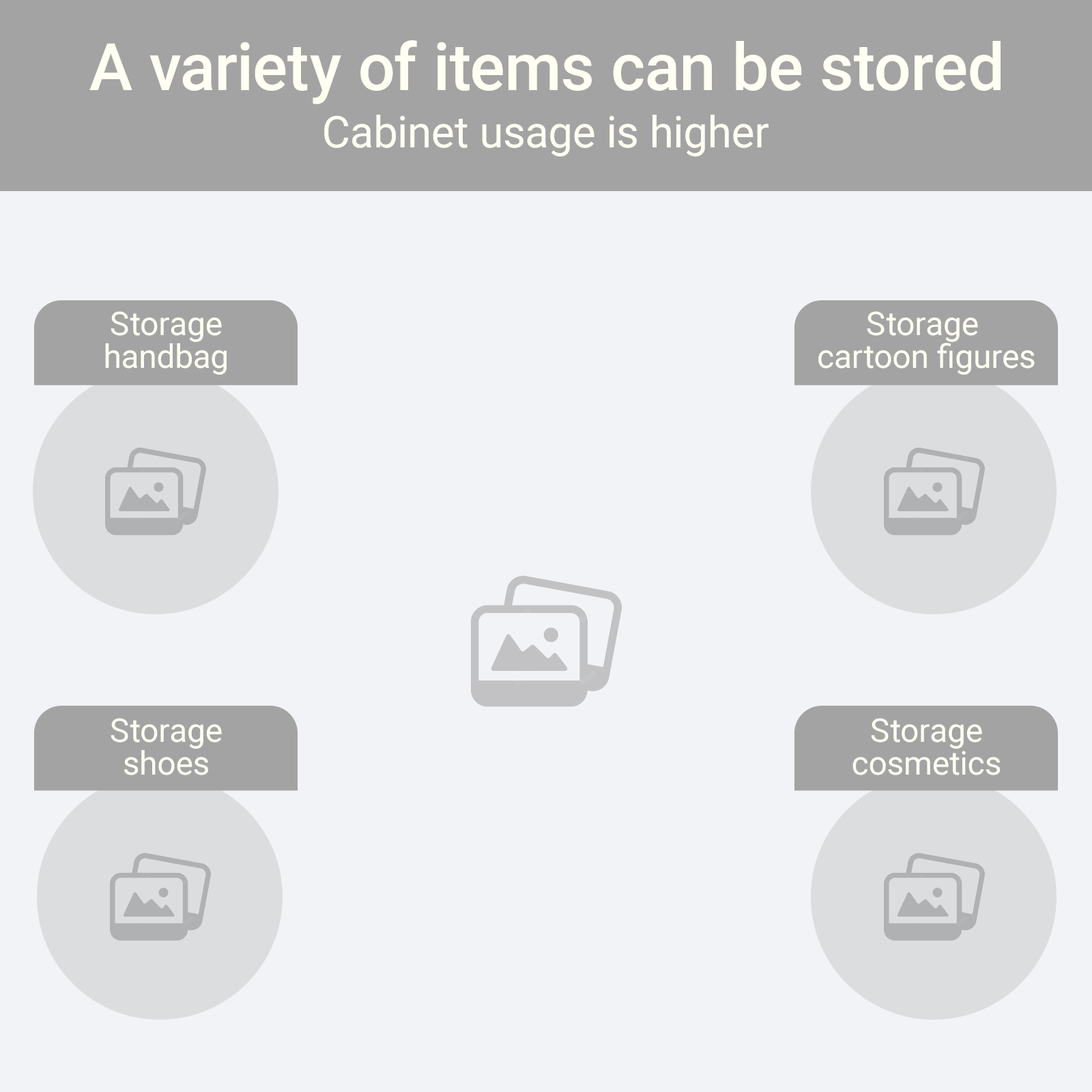
<style>
.page{position:relative;width:1092px;height:1092px;background:#f2f3f6}
.page>*{position:absolute;margin:0}
.t1{font:65.5px "Roboto-Medium";color:#fffff3}
.t2{font:43.7px "Roboto-Regular";color:#fffff3}
.t3{font:32.8px/32.8px "Roboto-Regular";color:#fffff3}
</style>
<div class="page">
<p class="t1" style="left:89px;top:40px;width:912px;height:64px">A variety of items can be stored</p>
<p class="t2" style="left:324px;top:115px;width:444px;height:42px">Cabinet usage is higher</p>
<p class="t3" style="left:105px;top:311px;width:122px;height:64px;text-align:center">Storage<br>handbag</p>
<p class="t3" style="left:818px;top:311px;width:217px;height:64px;text-align:center">Storage <br>cartoon figures</p>
<p class="t3" style="left:111px;top:718px;width:111px;height:57px;text-align:center">Storage<br>shoes</p>
<p class="t3" style="left:852px;top:718px;width:149px;height:57px;text-align:center">Storage<br>cosmetics</p>
</div>
